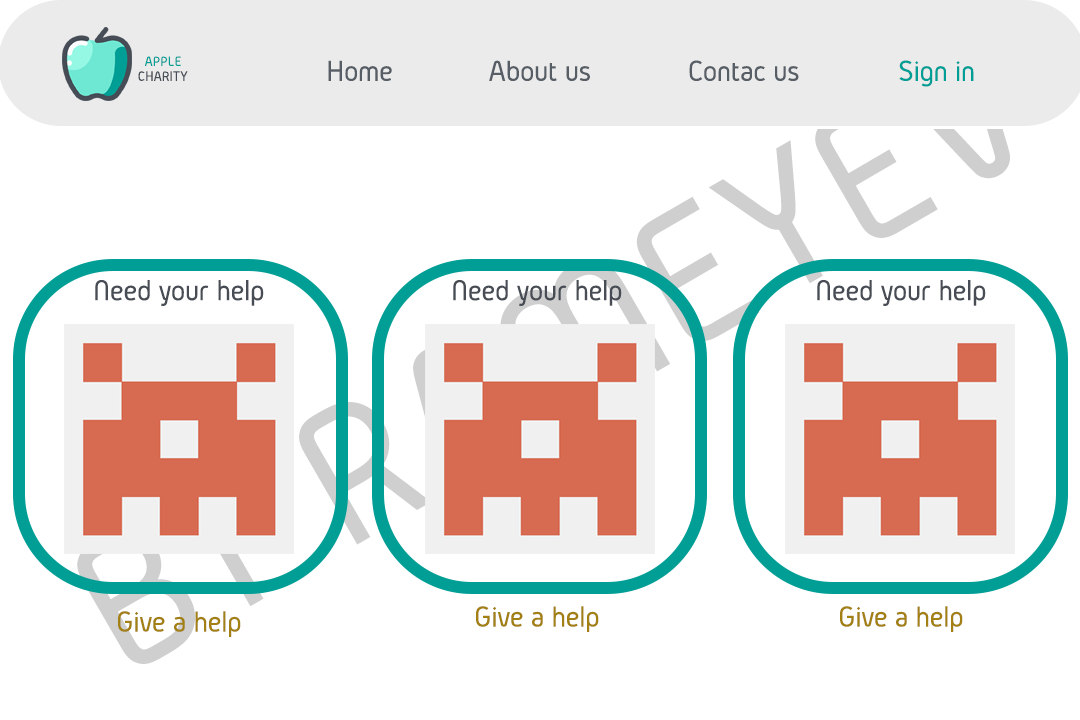
<style>
.page{position:relative;width:1080px;height:720px;background:#ffffff}
.page>*{position:absolute;margin:0}
.t1{font:14px "Gidolinya-Regular";color:#009e95}
.t2{font:30px "Gidolinya-Regular";color:#575e66}
.t3{font:30px "Gidolinya-Regular";color:#009e95}
.t4{font:14px "Gidolinya-Regular";color:#454c55}
.t5{font:30px "Gidolinya-Regular";color:#474c55}
.t6{font:30px "Gidolinya-Regular";color:#a38014}
</style>
<div class="page">
<p class="t1" style="left:144px;top:56px;width:37px;height:10px">APPLE</p>
<p class="t2" style="left:328px;top:60px;width:64px;height:21px">Home</p>
<p class="t2" style="left:489px;top:60px;width:101px;height:21px">About us</p>
<p class="t2" style="left:689px;top:60px;width:110px;height:21px">Contac us</p>
<p class="t3" style="left:899px;top:60px;width:75px;height:27px">Sign in</p>
<p class="t4" style="left:138px;top:71px;width:50px;height:10px">CHARITY</p>
<p class="t5" style="left:95px;top:280px;width:169px;height:26px">Need your help</p>
<p class="t5" style="left:453px;top:280px;width:169px;height:26px">Need your help</p>
<p class="t5" style="left:817px;top:280px;width:169px;height:26px">Need your help</p>
<p class="t6" style="left:476px;top:606px;width:123px;height:26px">Give a help</p>
<p class="t6" style="left:840px;top:606px;width:123px;height:26px">Give a help</p>
<p class="t6" style="left:118px;top:611px;width:123px;height:26px">Give a help</p>
</div>
